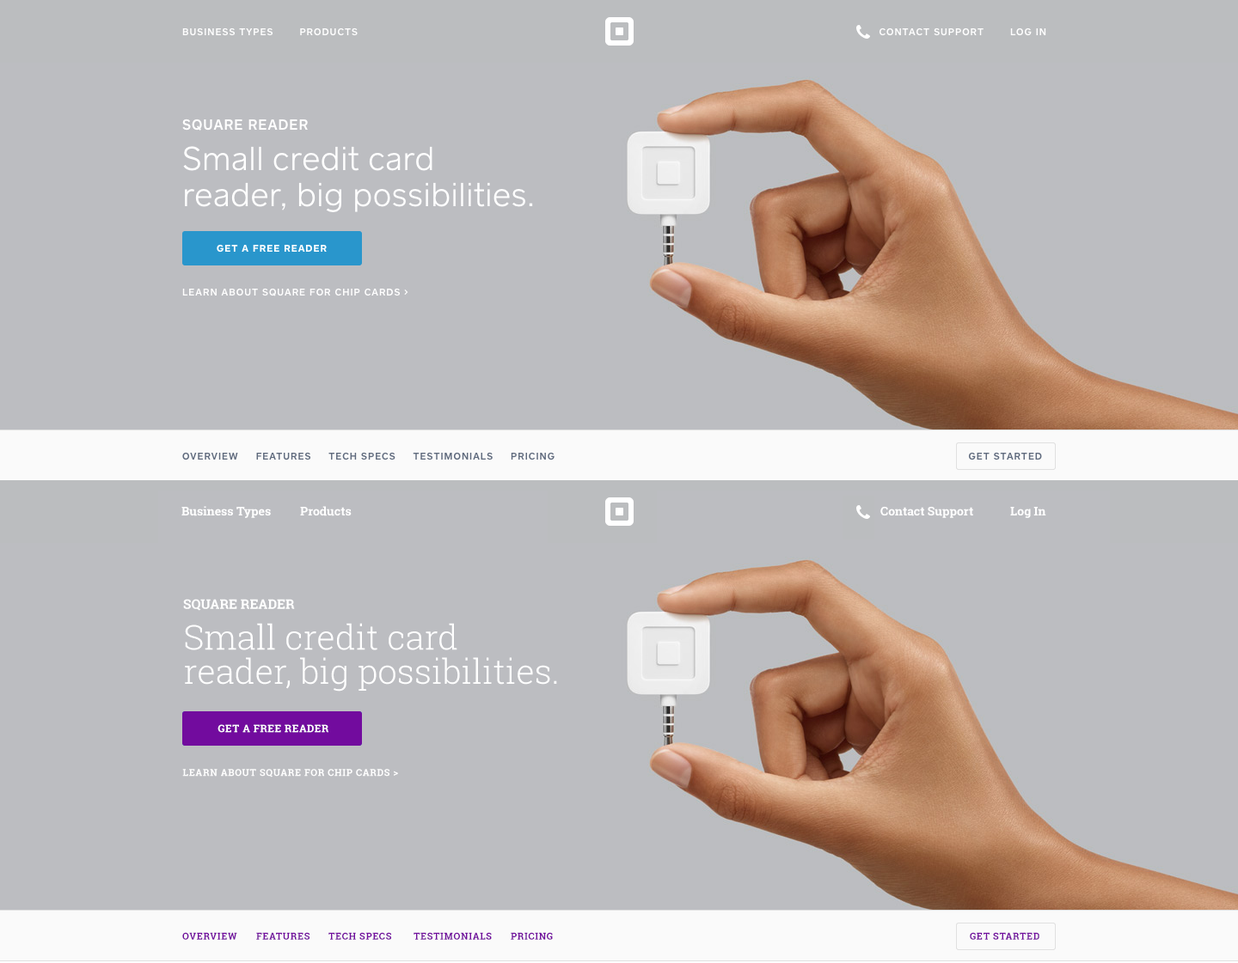
<style>
.page{position:relative;width:1238px;height:963px;background:#bcbdc1}
.page>*{position:absolute;margin:0}
.t1{font:12px "RobotoSlab-Bold";color:#ffffff}
.t2{font:13.3px "RobotoSlab-Bold";color:#ffffff}
.t3{font:34.4px/34.2px "RobotoSlab-Light";color:#ffffff}
.t4{font:10.3px "RobotoSlab-Bold";letter-spacing:0.04em;color:#ffffff}
.t5{font:9.5px "RobotoSlab-Bold";letter-spacing:0.06em;color:#ffffff}
.t6{font:9.5px "RobotoSlab-Bold";letter-spacing:0.06em;color:#720b9e}
</style>
<div class="page">
<p class="t1" style="left:181px;top:506px;width:90px;height:12px">Business Types</p>
<p class="t1" style="left:300px;top:506px;width:52px;height:11px">Products</p>
<p class="t1" style="left:880px;top:506px;width:93px;height:12px">Contact Support</p>
<p class="t1" style="left:1010px;top:507px;width:36px;height:11px">Log In</p>
<p class="t2" style="left:183px;top:599px;width:112px;height:12px">SQUARE READER</p>
<p class="t3" style="left:185px;top:623px;width:372px;height:69px">Small credit card<br>reader, big possibilities.</p>
<p class="t4" style="left:217px;top:725px;width:111px;height:8px">GET A FREE READER</p>
<p class="t5" style="left:182px;top:769px;width:216px;height:9px">LEARN ABOUT SQUARE FOR CHIP CARDS &gt;</p>
<p class="t6" style="left:182px;top:933px;width:55px;height:7px">OVERVIEW</p>
<p class="t6" style="left:256px;top:933px;width:53px;height:7px">FEATURES</p>
<p class="t6" style="left:328px;top:933px;width:63px;height:7px">TECH SPECS</p>
<p class="t6" style="left:413px;top:933px;width:79px;height:7px">TESTIMONIALS</p>
<p class="t6" style="left:511px;top:933px;width:42px;height:7px">PRICING</p>
<p class="t6" style="left:969px;top:933px;width:70px;height:7px">GET STARTED</p>
</div>
